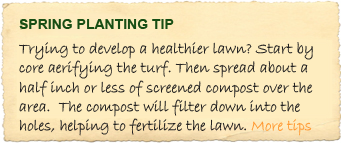
<style>
.page{position:relative;width:341px;height:143px;background:#feedbf}
.page>*{position:absolute;margin:0}
.t1{font:14px "Arial-BoldMT";color:#174e14}
.t2{font:16px "BradleyHandITC";color:#222121}
.t3{font:16px "BradleyHandITC";color:#ff9933}
</style>
<div class="page">
<p class="t1" style="left:19px;top:19px;width:155px;height:10px">SPRING PLANTING TIP</p>
<p class="t2" style="left:19px;top:42px;width:294px;height:94px">Trying to develop a healthier lawn? Start by core aerifying the turf. Then spread about a half inch or less of screened compost over the area.  The compost will filter down into the holes, helping to fertilize the lawn. <span class="t3">More tips</span></p>
</div>
